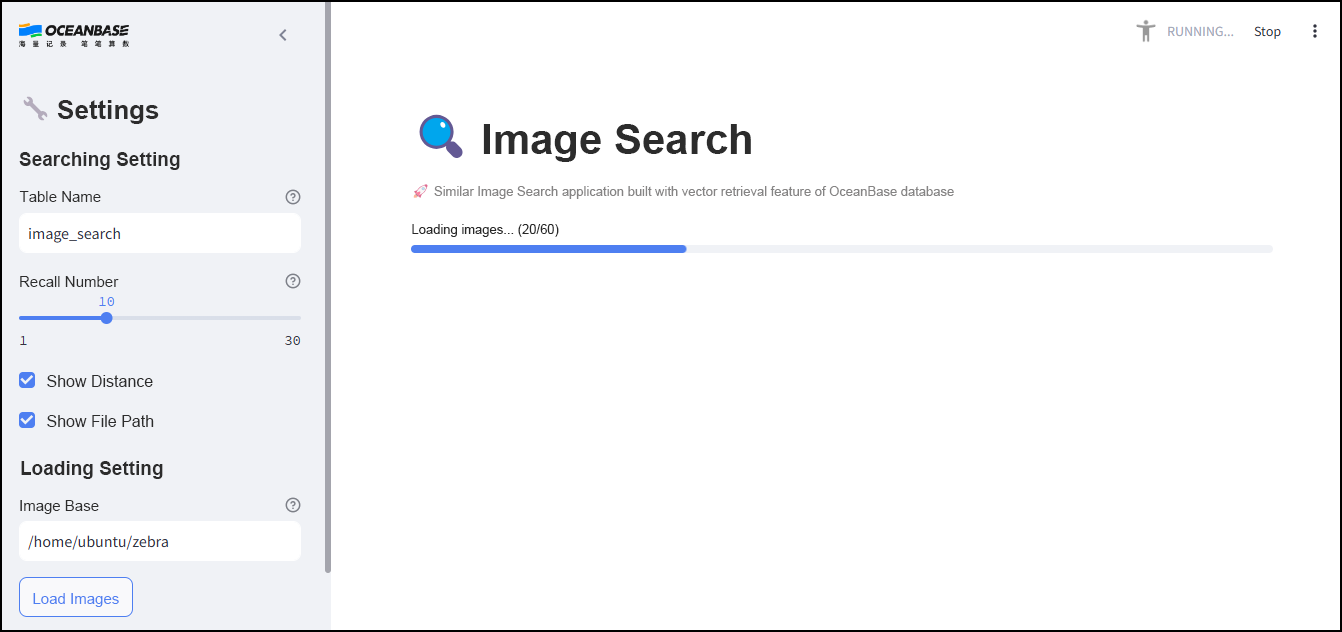
<style>
.page{position:relative;width:1342px;height:632px;background:#ffffff}
.page>*{position:absolute;margin:0}
.t1{font:26px "Arial-BoldMT";color:#2c2c2c}
.t2{font:42px "Arial-BoldMT";color:#2c2c2c}
.t3{font:19px "Arial-BoldMT";color:#2c2c2c}
.t4{font:15px "ArialMT";color:#2c2c2c}
.t5{font:13px "ArialMT";color:#858484}
.t6{font:13px "ArialMT";color:#282828}
.t7{font:16px/40px "ArialMT";color:#2c2c2c}
.t8{font:15px "ArialMT";color:#4e7ff1}
</style>
<div class="page">
<p class="t1" style="left:57px;top:100px;width:102px;height:24px">Settings</p>
<p class="t2" style="left:483px;top:124px;width:268px;height:38px">Image Search</p>
<p class="t3" style="left:19px;top:152px;width:161px;height:18px">Searching Setting</p>
<p class="t4" style="left:19px;top:191px;width:82px;height:11px">Table Name</p>
<p class="t5" style="left:434px;top:186px;width:520px;height:13px">Similar Image Search application built with vector retrieval feature of OceanBase database</p>
<p class="t6" style="left:412px;top:224px;width:147px;height:13px">Loading images... (20/60)</p>
<p class="t4" style="left:20px;top:276px;width:99px;height:11px">Recall Number</p>
<p class="t7" style="left:47px;top:375px;width:107px;height:52px">Show Distance<br>Show File Path</p>
<p class="t3" style="left:21px;top:461px;width:142px;height:18px">Loading Setting</p>
<p class="t4" style="left:20px;top:500px;width:79px;height:14px">Image Base</p>
<p class="t8" style="left:33px;top:593px;width:86px;height:14px">Load Images</p>
</div>
